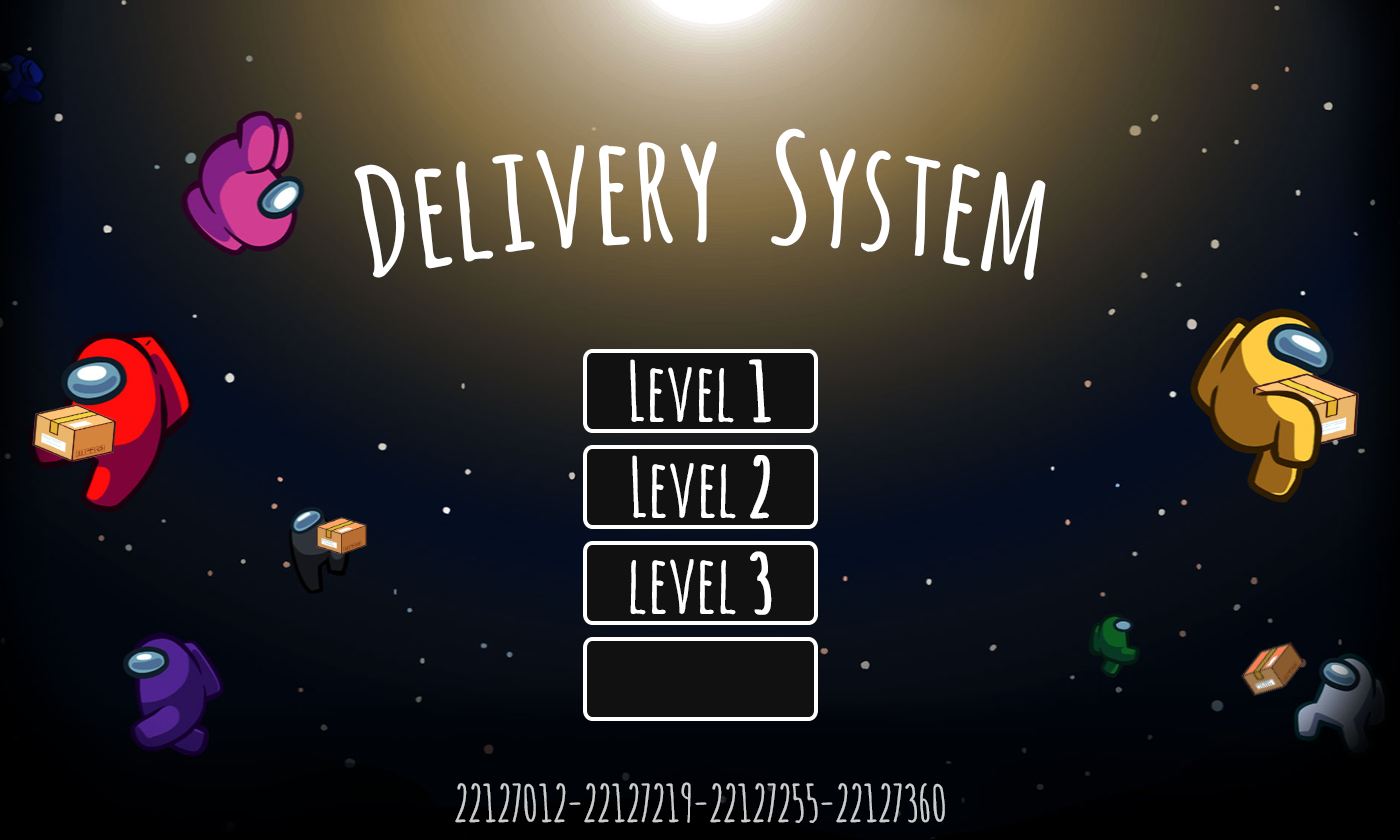
<style>
.page{position:relative;width:1400px;height:840px}
.page>*{position:absolute;margin:0}
.t1{font:150px "AmaticSC-Bold";color:#ffffff}
.t2{font:80px "AmaticSC-Bold";color:#ffffff}
.t3{font:80px "AmaticSC-Bold";color:#ffffff;font-weight:bold}
.t4{font:50px "AmaticSC-Bold";color:#cbcbcc}
</style>
<div class="page">
<p class="t1" style="left:354px;top:128px;width:692px;height:152px">Delivery  System</p>
<p class="t2" style="left:630px;top:359px;width:141px;height:64px">Level <span class="t3">1</span></p>
<p class="t2" style="left:632px;top:455px;width:138px;height:64px">Level <span class="t3">2</span></p>
<p class="t2" style="left:630px;top:551px;width:142px;height:64px">level <span class="t3">3</span></p>
<p class="t4" style="left:455px;top:782px;width:490px;height:41px">22127012-22127219-22127255-22127360</p>
</div>
